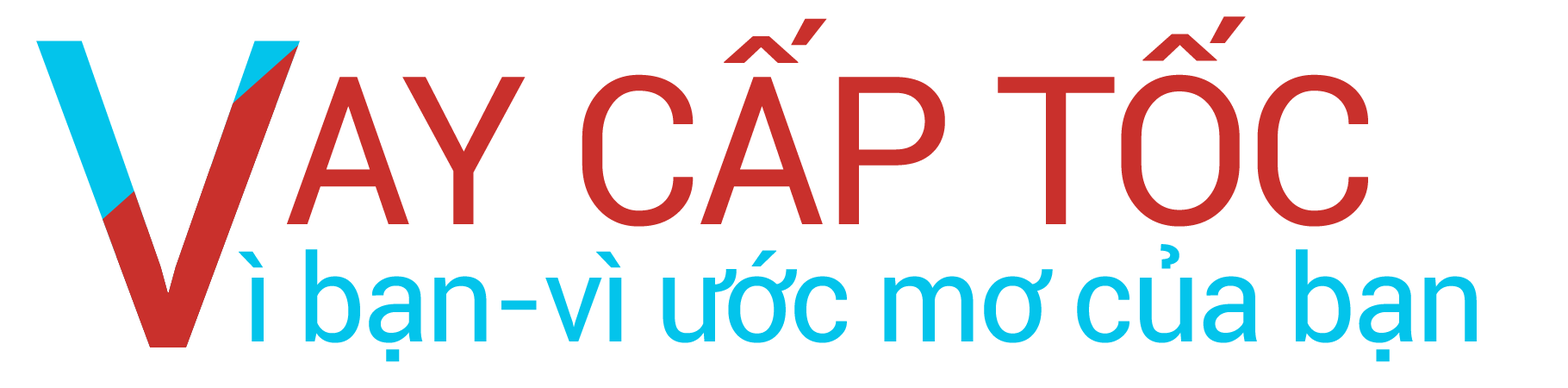
<style>
.page{position:relative;width:1568px;height:388px;background:#ffffff}
.page>*{position:absolute;margin:0}
.t1{font:206.8px "Roboto-Regular";letter-spacing:-0.025em;color:#c9302c}
.t2{font:430.8px "Roboto-Regular";letter-spacing:-0.025em}
.t3{font:120.6px "Roboto-Regular";letter-spacing:-0.025em;color:#03c4eb}
</style>
<div class="page">
<p class="t1" style="left:287px;top:16px;width:1081px;height:211px">AY CẤP TỐC</p>
<p class="t2" style="left:36px;top:40px;width:264px;height:307px">V</p>
<p class="t3" style="left:239px;top:244px;width:1238px;height:118px">ì bạn-vì ước mơ của bạn</p>
</div>
